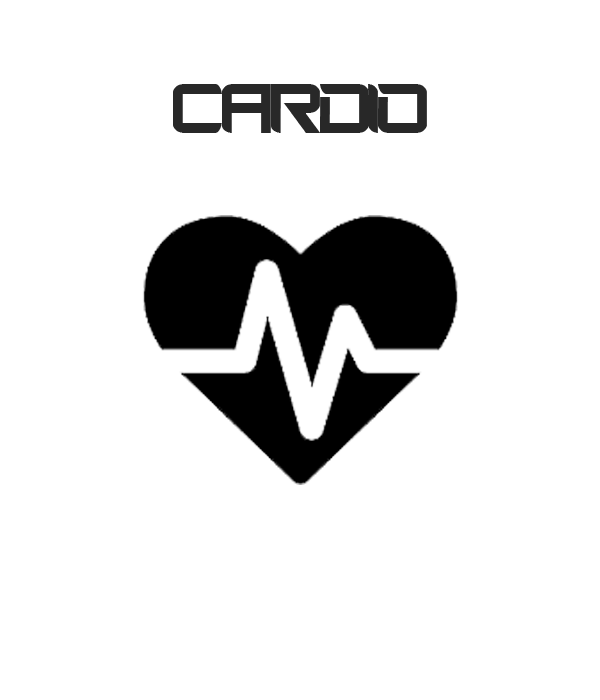
<style>
.page{position:relative;width:600px;height:700px;background:#ffffff}
.page>*{position:absolute;margin:0}
.t1{font:61px "Amazing-Spider-Man";color:#282828}
</style>
<div class="page">
<p class="t1" style="left:173px;top:84px;width:254px;height:49px">CARDIO</p>
</div>
